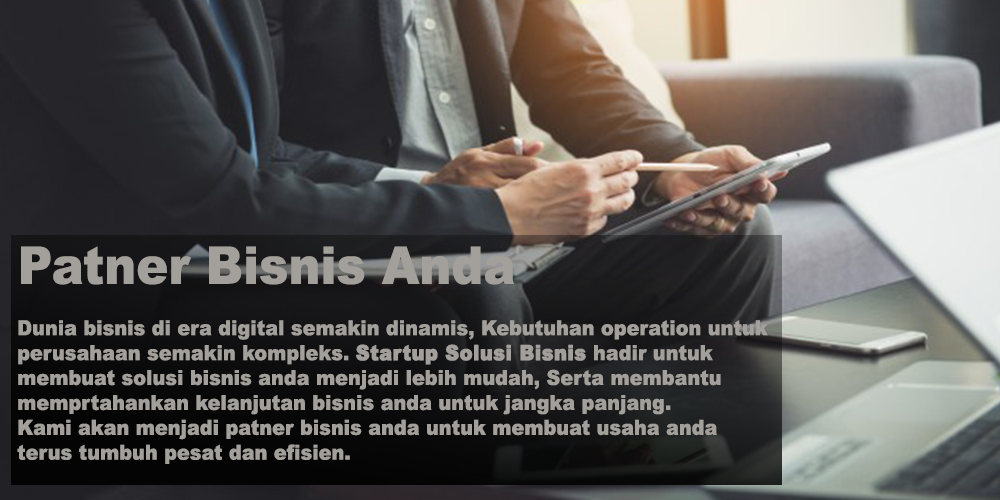
<style>
.page{position:relative;width:1000px;height:500px}
.page>*{position:absolute;margin:0}
.t1{font:51.9px "Arial-Black";color:#a39f9a;scale:0.93 1}
.t2{font:20.7px "Arial-Black";color:#a39f9a;scale:0.93 1}
.t3{font:20.7px "Arial-Black";color:#a39f9a;font-weight:bold;scale:0.93 1}
</style>
<div class="page">
<p class="t1" style="left:21px;top:246px;width:493px;height:39px">Patner Bisnis Anda</p>
<p class="t2" style="left:17px;top:320px;width:751px;height:144px">Dunia bisnis di era digital semakin dinamis, Kebutuhan operation untuk<br>perusahaan semakin kompleks. <span class="t3">Startup Solusi Bisnis</span> hadir untuk <br>membuat solusi bisnis anda menjadi lebih mudah, Serta membantu<br>memprtahankan kelanjutan bisnis anda untuk jangka panjang.<br>Kami akan menjadi patner bisnis anda untuk membuat usaha anda<br>terus tumbuh pesat dan efisien.</p>
</div>
